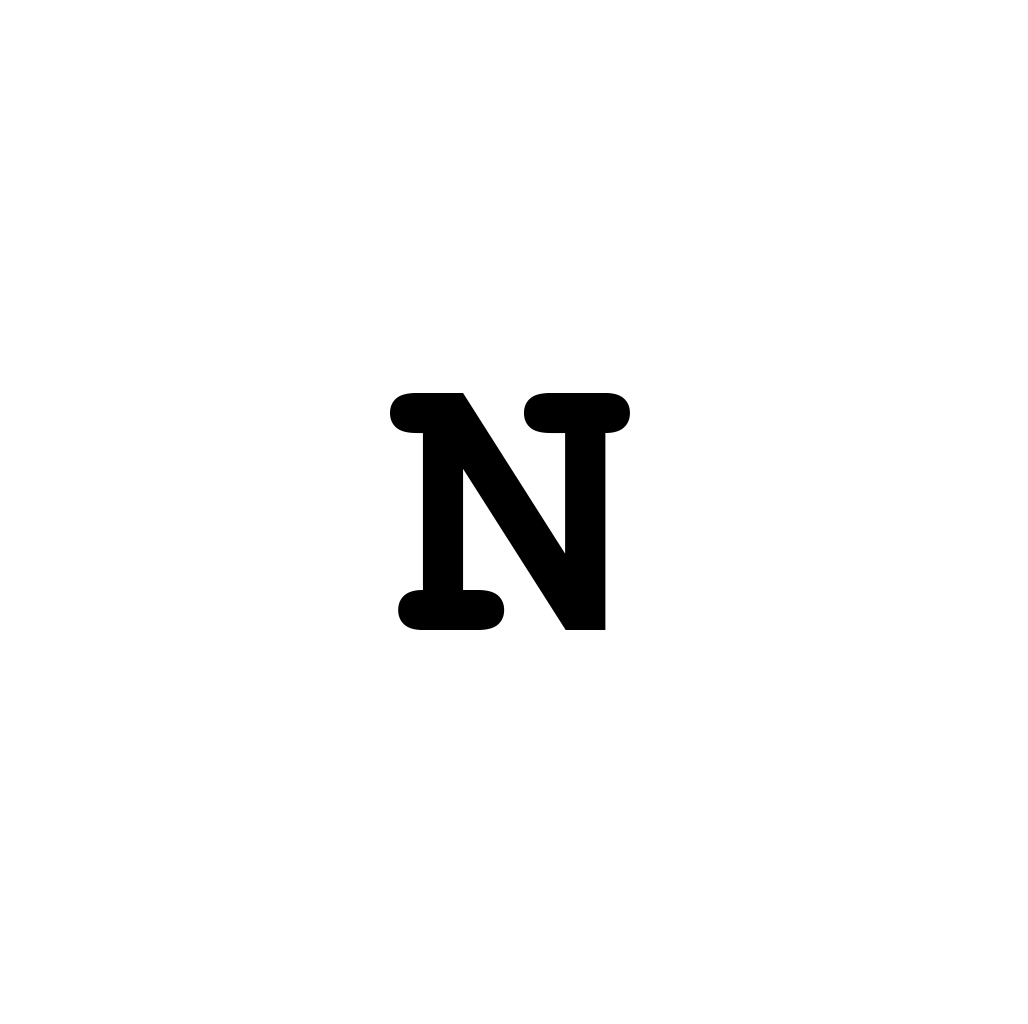
<style>
.page{position:relative;width:1028px;height:1024px;background:#ffffff}
.page>*{position:absolute;margin:0}
.t1{font:400px "CourierNewPS-BoldMT";color:#000000}
</style>
<div class="page">
<p class="t1" style="left:390px;top:393px;width:240px;height:237px">N</p>
</div>
